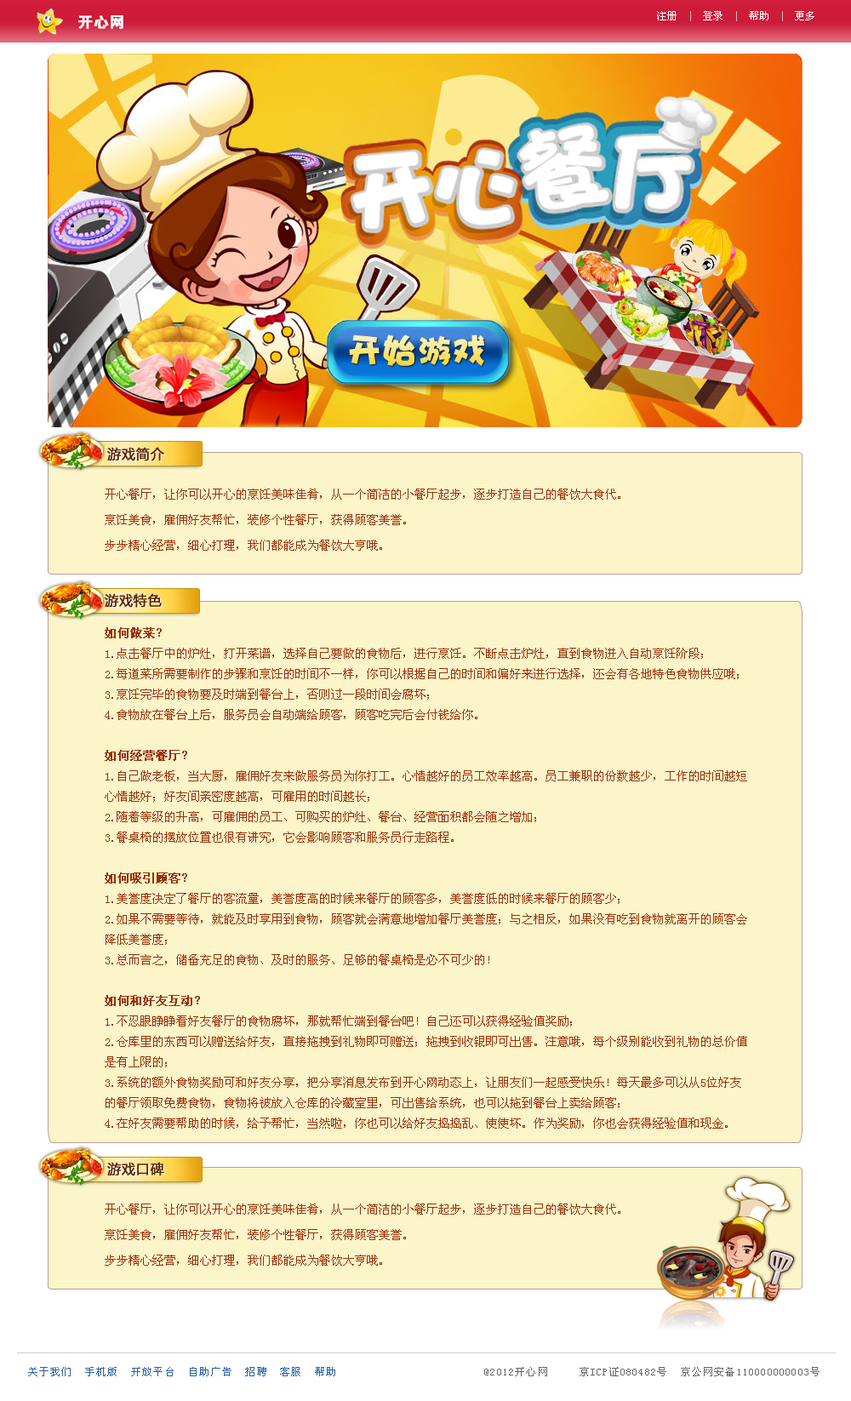
<style>
.page{position:relative;width:851px;height:1401px;background:#fbf5c9}
.page>*{position:absolute;margin:0}
.t1{font:15.3px "FZDHTJW--GB1-0";color:#ffffff;font-weight:bold}
.t2{font:10.2px "SimSun";color:#ffffff}
.t3{font:10.2px "SimSun";color:#dbb9b9}
.t4{font:11.9px/25.5px "SimSun";color:#9c2f06}
.t5{font:11.9px/20.4px "SimSun";color:#9c2f06}
.t6{font:11.9px/20.4px "SimSun";color:#9c2f06;font-weight:bold}
.t7{font:10.2px "SimSun";letter-spacing:0.1em;color:#666666}
.t8{font:10.2px "SimSun";letter-spacing:0.1em;color:#2b62a5}
</style>
<div class="page">
<p class="t1" style="left:78px;top:15px;width:45px;height:14px">开心网</p>
<p class="t2" style="left:657px;top:11px;width:158px;height:10px">注册  <span class="t3">|</span>  登录  <span class="t3">|</span>  帮助  <span class="t3">|</span>  更多</p>
<p class="t4" style="left:105px;top:489px;width:515px;height:62px">开心餐厅，让你可以开心的烹饪美味佳肴，从一个简洁的小餐厅起步，逐步打造自己的餐饮大食代。<br>烹饪美食，雇佣好友帮忙，装修个性餐厅，获得顾客美誉。<br>步步精心经营，细心打理，我们都能成为餐饮大亨哦。</p>
<p class="t5" style="left:105px;top:627px;width:642px;height:502px"><span class="t6">如何做菜？<br></span>1.点击餐厅中的炉灶，打开菜谱，选择自己要做的食物后，进行烹饪。不断点击炉灶，直到食物进入自动烹饪阶段；<br>2.每道菜所需要制作的步骤和烹饪的时间不一样，你可以根据自己的时间和偏好来进行选择，还会有各地特色食物供应哦；<br>3.烹饪完毕的食物要及时端到餐台上，否则过一段时间会腐坏；<br>4.食物放在餐台上后，服务员会自动端给顾客，顾客吃完后会付钱给你。<br><br><span class="t6">如何经营餐厅？<br></span>1.自己做老板，当大厨，雇佣好友来做服务员为你打工。心情越好的员工效率越高。员工兼职的份数越少，工作的时间越短<br>心情越好；好友间亲密度越高，可雇用的时间越长；<br>2.随着等级的升高，可雇佣的员工、可购买的炉灶、餐台、经营面积都会随之增加；<br>3.餐桌椅的摆放位置也很有讲究，它会影响顾客和服务员行走路程。<br><br><span class="t6">如何吸引顾客？<br></span>1.美誉度决定了餐厅的客流量，美誉度高的时候来餐厅的顾客多，美誉度低的时候来餐厅的顾客少；<br>2.如果不需要等待，就能及时享用到食物，顾客就会满意地增加餐厅美誉度；与之相反，如果没有吃到食物就离开的顾客会<br>降低美誉度；<br>3.总而言之，储备充足的食物、及时的服务、足够的餐桌椅是必不可少的！<br><br><span class="t6">如何和好友互动？<br></span>1.不忍眼睁睁看好友餐厅的食物腐坏，那就帮忙端到餐台吧！自己还可以获得经验值奖励；<br>2.仓库里的东西可以赠送给好友，直接拖拽到礼物即可赠送；拖拽到收银即可出售。注意哦，每个级别能收到礼物的总价值<br>是有上限的；<br>3.系统的额外食物奖励可和好友分享，把分享消息发布到开心网动态上，让朋友们一起感受快乐！每天最多可以从5位好友<br>的餐厅领取免费食物，食物将被放入仓库的冷藏室里，可出售给系统，也可以拖到餐台上卖给顾客；<br>4.在好友需要帮助的时候，给予帮忙，当然啦，你也可以给好友捣捣乱、使使坏。作为奖励，你也会获得经验值和现金。</p>
<p class="t4" style="left:105px;top:1204px;width:515px;height:62px">开心餐厅，让你可以开心的烹饪美味佳肴，从一个简洁的小餐厅起步，逐步打造自己的餐饮大食代。<br>烹饪美食，雇佣好友帮忙，装修个性餐厅，获得顾客美誉。<br>步步精心经营，细心打理，我们都能成为餐饮大亨哦。</p>
<p class="t7" style="left:28px;top:1367px;width:792px;height:9px"><span class="t8">    关于我们  手机版  开放平台  自助广告  招聘  客服  帮助                        </span>@2012开心网     京ICP证080482号  京公网安备110000000003号</p>
</div>
